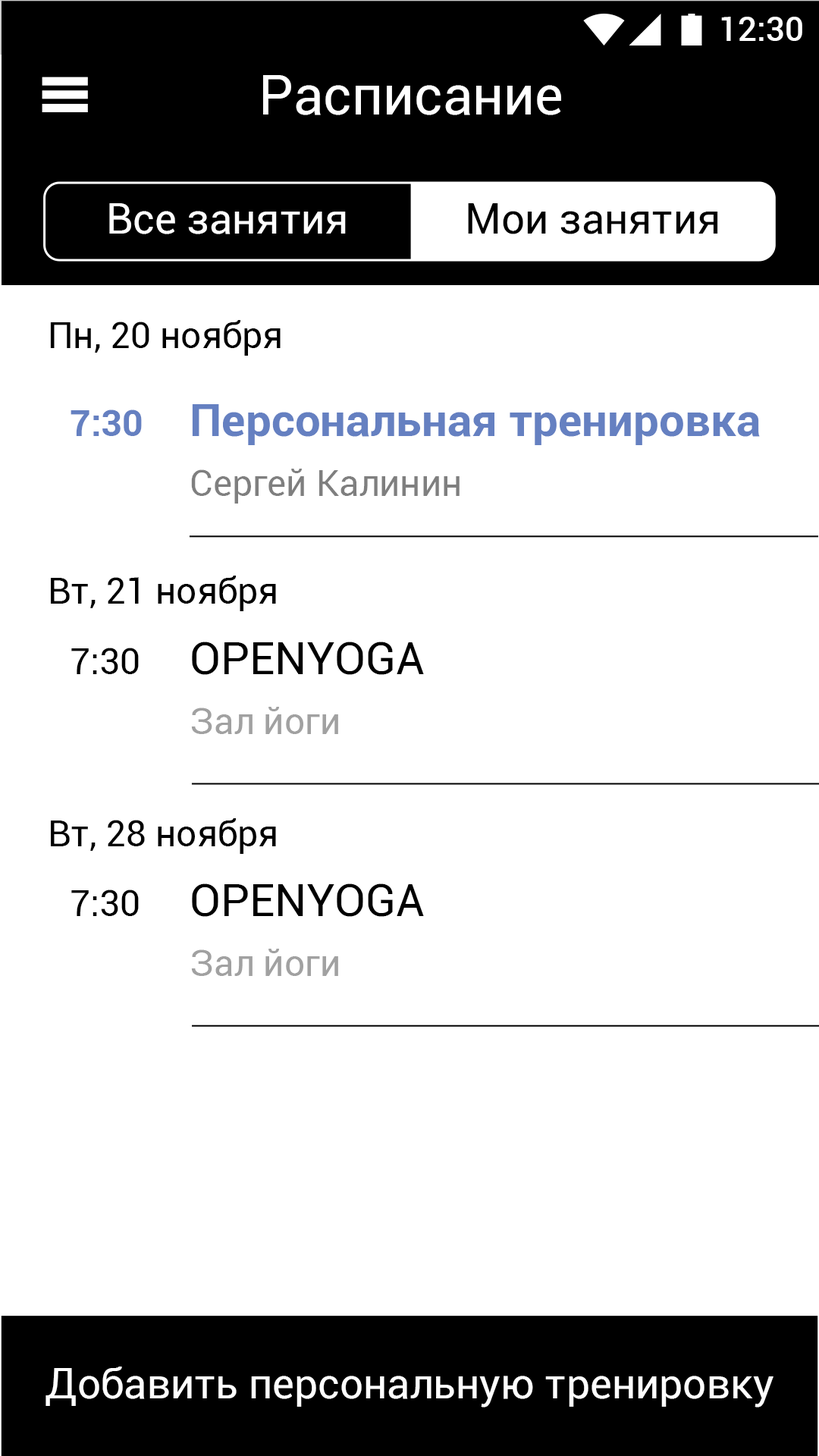
<style>
.page{position:relative;width:819px;height:1456px;background:#ffffff}
.page>*{position:absolute;margin:0}
.t1{font:33.4px "Roboto-Medium";color:#ffffff}
.t2{font:54.6px "Roboto-Regular";color:#ffffff}
.t3{font:41.7px "Roboto-Regular";color:#ffffff}
.t4{font:41.7px "Roboto-Regular";color:#000000}
.t5{font:36.4px "Roboto-Regular";color:#000000}
.t6{font:36.4px "Roboto-Bold";color:#6580c1}
.t7{font:45.5px "Roboto-Bold";color:#6580c1}
.t8{font:36.4px "Roboto-Regular";color:#7f7f7f}
.t9{font:45.5px "Roboto-Regular";color:#000000}
.t10{font:36.4px "Roboto-Regular";color:#a1a1a1}
</style>
<div class="page">
<p class="t1" style="left:721px;top:17px;width:81px;height:24px">12:30</p>
<p class="t2" style="left:263px;top:75px;width:298px;height:40px">Расписание</p>
<p class="t3" style="left:109px;top:203px;width:237px;height:31px">Все занятия</p>
<p class="t4" style="left:468px;top:203px;width:250px;height:31px">Мои занятия</p>
<p class="t5" style="left:50px;top:320px;width:231px;height:36px">Пн, 20 ноября</p>
<p class="t6" style="left:71px;top:409px;width:71px;height:27px">7:30</p>
<p class="t7" style="left:192px;top:404px;width:568px;height:41px">Персональная тренировка</p>
<p class="t8" style="left:191px;top:469px;width:269px;height:35px">Сергей Калинин</p>
<p class="t5" style="left:51px;top:576px;width:225px;height:35px">Вт, 21 ноября</p>
<p class="t9" style="left:192px;top:642px;width:232px;height:33px">OPENYOGA</p>
<p class="t5" style="left:71px;top:648px;width:68px;height:26px">7:30</p>
<p class="t10" style="left:191px;top:707px;width:147px;height:27px">Зал йоги</p>
<p class="t5" style="left:51px;top:818px;width:225px;height:36px">Вт, 28 ноября</p>
<p class="t5" style="left:71px;top:890px;width:68px;height:26px">7:30</p>
<p class="t9" style="left:192px;top:883px;width:232px;height:34px">OPENYOGA</p>
<p class="t10" style="left:191px;top:949px;width:147px;height:27px">Зал йоги</p>
<p class="t3" style="left:45px;top:1366px;width:728px;height:41px">Добавить персональную тренировку</p>
</div>
